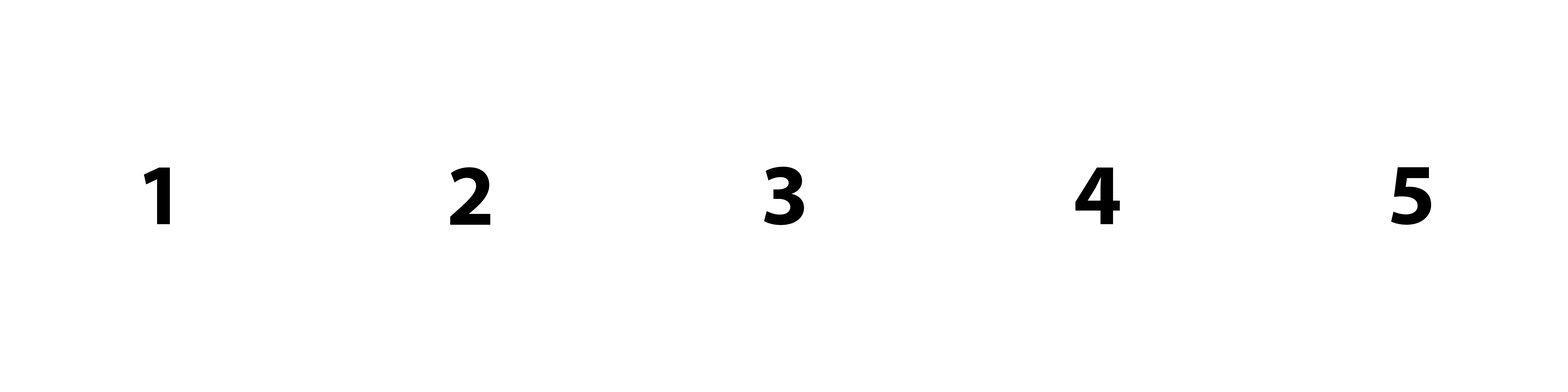
<style>
.page{position:relative;width:1568px;height:392px;background:#ffffff}
.page>*{position:absolute;margin:0}
.t1{font:87.1px "MyriadPro-Bold";color:#000000}
</style>
<div class="page">
<p class="t1" style="left:144px;top:168px;width:26px;height:56px">1</p>
<p class="t1" style="left:450px;top:167px;width:40px;height:58px">2</p>
<p class="t1" style="left:764px;top:167px;width:40px;height:58px">3</p>
<p class="t1" style="left:1075px;top:168px;width:45px;height:56px">4</p>
<p class="t1" style="left:1391px;top:167px;width:40px;height:58px">5</p>
</div>
